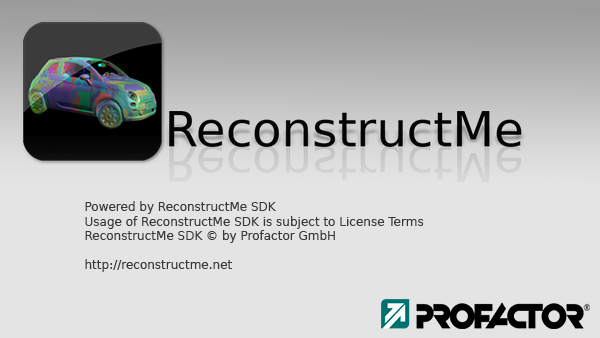
<style>
.page{position:relative;width:600px;height:338px;background:#e4e4e4}
.page>*{position:absolute;margin:0}
.t1{font:12px "DejaVuSans";color:#393939}
</style>
<div class="page">
<p class="t1" style="left:85px;top:201px;width:339px;height:71px;text-align:right">Powered by ReconstructMe SDK<br>Usage of ReconstructMe SDK is subject to License Terms<br>ReconstructMe SDK © by Profactor GmbH<br><br>http://reconstructme.net</p>
</div>
